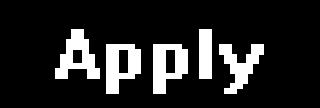
<style>
.page{position:relative;width:320px;height:108px;background:#000000}
.page>*{position:absolute;margin:0}
.t1{font:62.5px "System";letter-spacing:0.05em;color:#ffffff;font-weight:bold;scale:1.1 1}
</style>
<div class="page">
<p class="t1" style="left:55px;top:29px;width:209px;height:65px">Apply</p>
</div>
